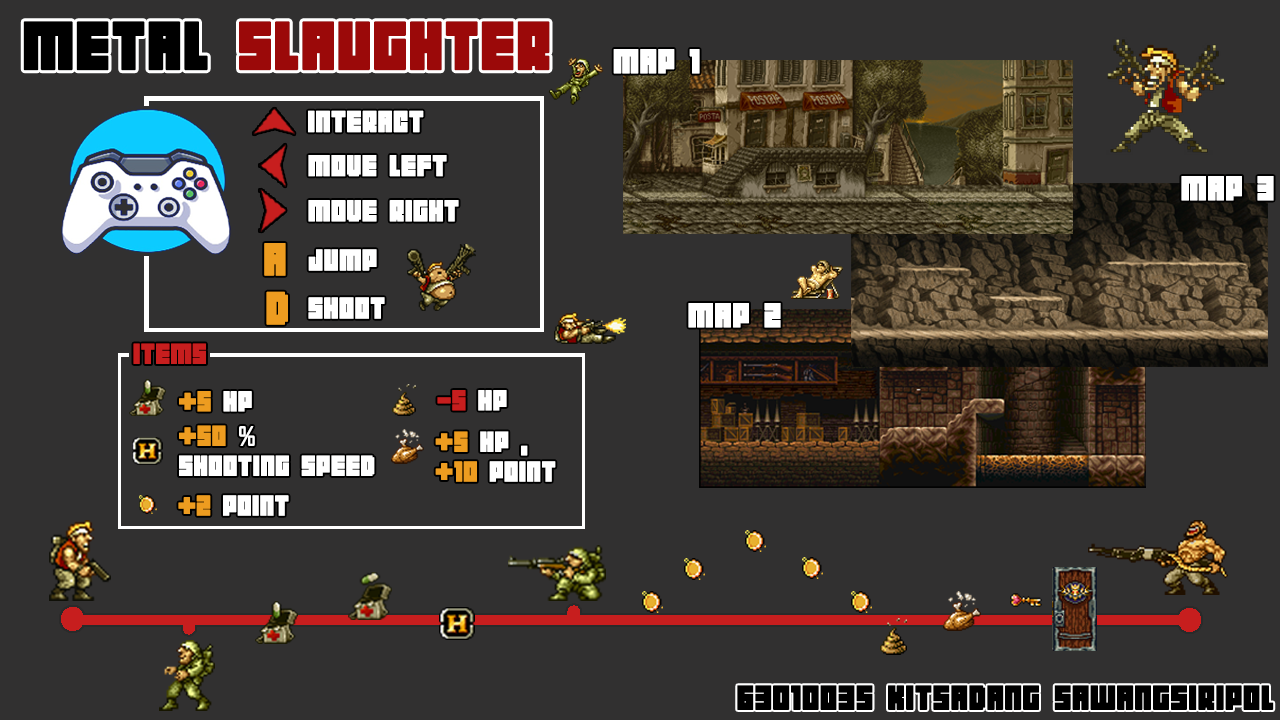
<style>
.page{position:relative;width:1280px;height:720px;background:#313030}
.page>*{position:absolute;margin:0}
.t1{font:60px "04b19";color:#9b0909;font-weight:bold}
.t2{font:60px "04b19";color:#000000;font-weight:bold}
.t3{font:30px "04b19";color:#ffffff;font-weight:bold}
.t4{font:26.1px "04b19";color:#ffffff;font-weight:bold}
.t5{font:40.1px "04b19";color:#ed9c20;font-weight:bold}
.t6{font:24.9px "04b19";color:#c71e1e;font-weight:bold}
.t7{font:24.9px "04b19";color:#ffffff;font-weight:bold}
.t8{font:24.9px "04b19";color:#ed9c20;font-weight:bold}
.t9{font:24.9px "AgencyFB-Reg";color:#ffffff;font-weight:bold}
.t10{font:30px "04b19";color:#000000;font-weight:bold}
</style>
<div class="page">
<p class="t1" style="left:23px;top:21px;width:527px;height:50px"><span class="t2">METAL </span>SLAUGHTER</p>
<p class="t3" style="left:613px;top:49px;width:87px;height:25px">MAP 1</p>
<p class="t4" style="left:308px;top:110px;width:116px;height:23px">INTERACT</p>
<p class="t4" style="left:308px;top:155px;width:139px;height:22px">MOVE LEFT</p>
<p class="t3" style="left:1181px;top:176px;width:93px;height:25px">MAP 3</p>
<p class="t4" style="left:308px;top:200px;width:151px;height:22px">MOVE RIGHT</p>
<p class="t5" style="left:264px;top:243px;width:22px;height:33px">A</p>
<p class="t4" style="left:308px;top:249px;width:69px;height:22px">JUMP</p>
<p class="t5" style="left:266px;top:291px;width:22px;height:34px">D</p>
<p class="t4" style="left:308px;top:297px;width:77px;height:22px">SHOOT</p>
<p class="t3" style="left:688px;top:303px;width:93px;height:25px">MAP 2</p>
<p class="t6" style="left:133px;top:343px;width:73px;height:21px">ITEMS</p>
<p class="t6" style="left:437px;top:390px;width:70px;height:21px">-5<span class="t7"> HP</span></p>
<p class="t8" style="left:179px;top:391px;width:73px;height:21px">+5<span class="t7"> HP</span></p>
<p class="t7" style="left:179px;top:425px;width:196px;height:51px"><span class="t8">+50 </span><span class="t9">% <br></span>SHOOTING SPEED</p>
<p class="t7" style="left:435px;top:431px;width:121px;height:51px"><span class="t8">+5</span> HP , <br><span class="t8">+10</span> POINT</p>
<p class="t7" style="left:178px;top:495px;width:111px;height:21px"><span class="t8">+2</span> POINT</p>
<p class="t10" style="left:737px;top:685px;width:537px;height:25px">63010035 KITSADANG SAWANGSIRIPOL</p>
</div>
